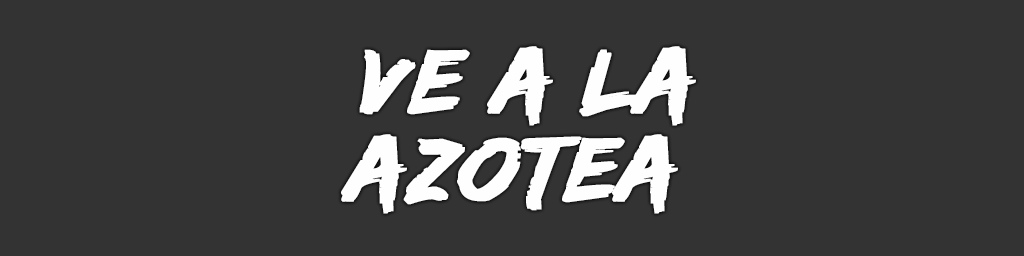
<style>
.page{position:relative;width:1024px;height:256px;background:#333333}
.page>*{position:absolute;margin:0}
.t1{font:94px/88px "EdoSZ";color:#fefefe;font-weight:bold;font-style:italic;scale:1.04 1}
</style>
<div class="page">
<p class="t1" style="left:341px;top:46px;width:355px;height:168px;text-align:center">ve a la<br>azotea</p>
</div>
